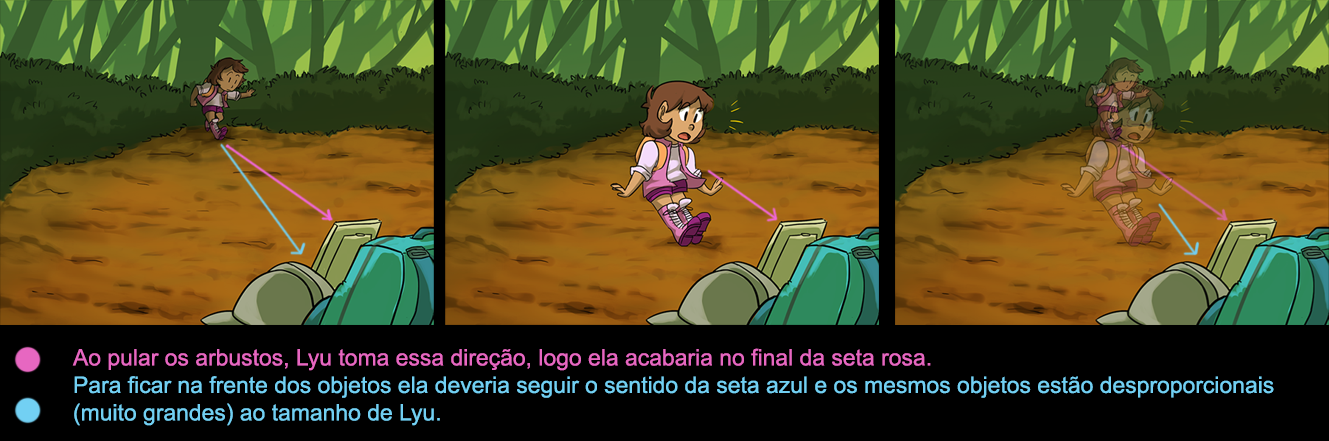
<style>
.page{position:relative;width:1329px;height:441px;background:#000000}
.page>*{position:absolute;margin:0}
.t1{font:22.9px "ArialMT";color:#72d0f3}
.t2{font:22.9px "ArialMT";color:#e767c1}
</style>
<div class="page">
<p class="t1" style="left:72px;top:348px;width:1202px;height:78px"><span class="t2">Ao pular os arbustos, Lyu toma essa direção, logo ela acabaria no final da seta rosa.<br></span>Para ficar na frente dos objetos ela deveria seguir o sentido da seta azul e os mesmos objetos estão desproporcionais (muito grandes) ao tamanho de Lyu.</p>
</div>
